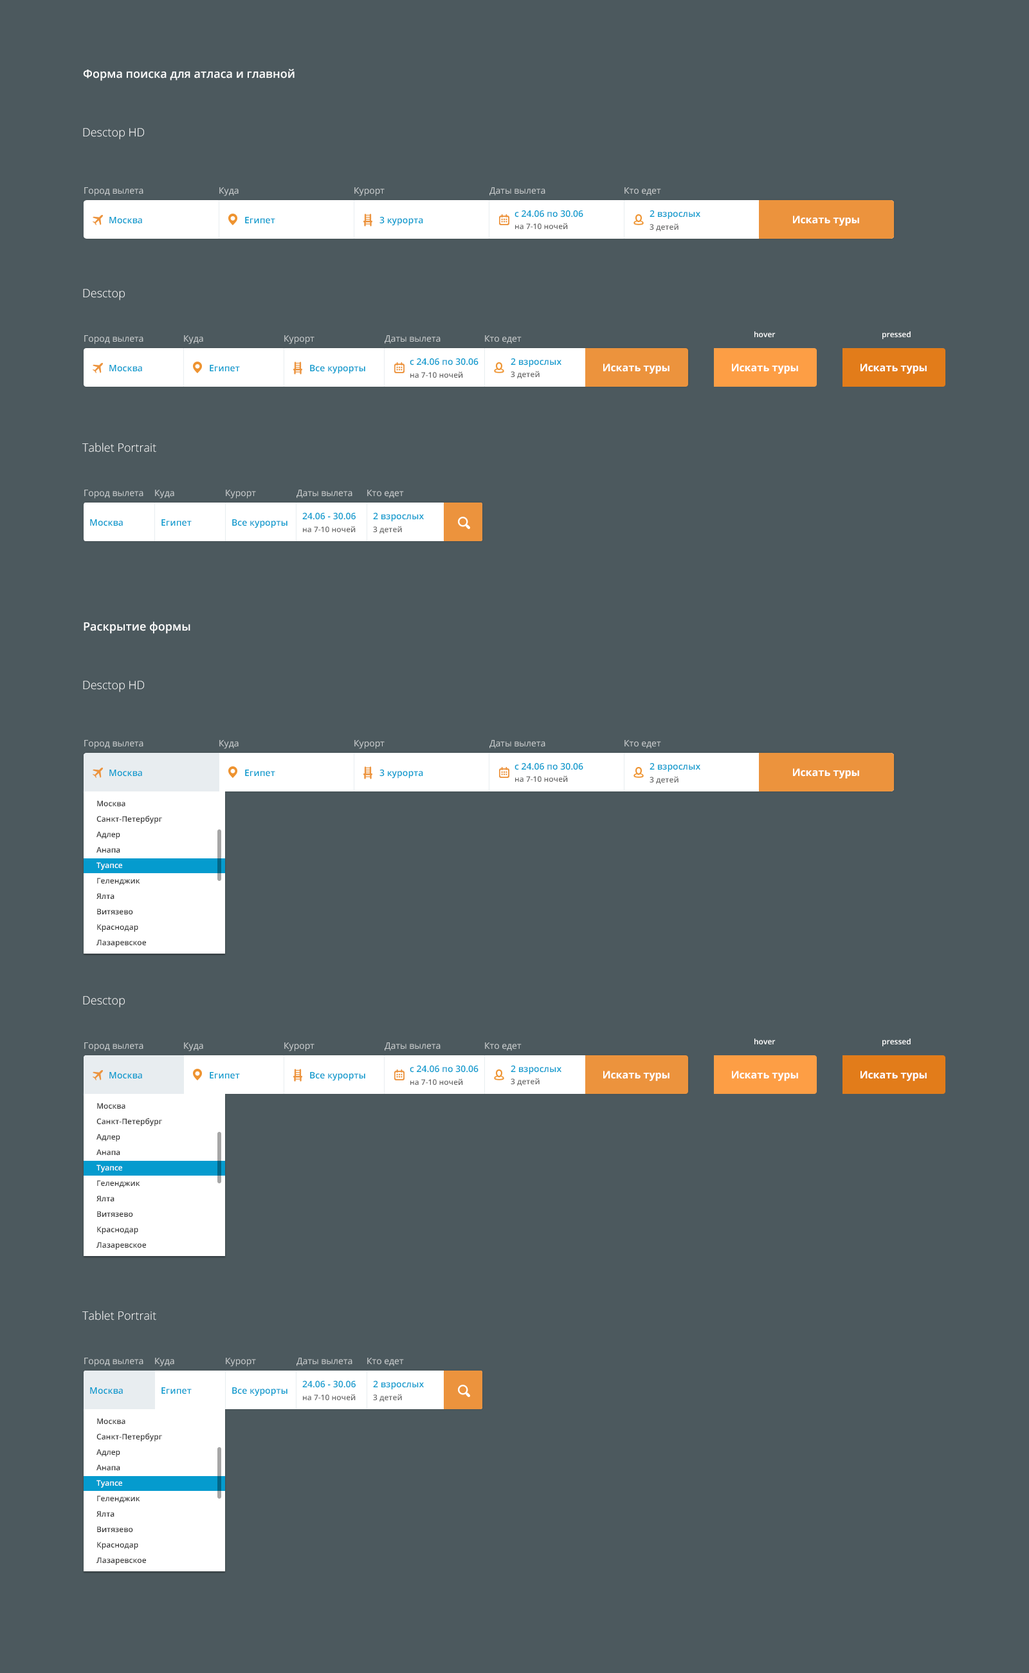
<style>
.page{position:relative;width:1029px;height:1673px;background:#4c595e}
.page>*{position:absolute;margin:0}
.t1{font:11.6px "OpenSans-Semibold";color:#ffffff}
.t2{font:11.6px "OpenSans-Light";color:#ffffff}
.t3{font:9px "OpenSans";color:#cacecf}
.t4{font:9px "OpenSans-Semibold";color:#059bce}
.t5{font:10.3px "OpenSans-Bold";color:#ffffff}
.t6{font:7.7px "OpenSans-Semibold";color:#666666}
.t7{font:7.7px "OpenSans-Semibold";color:#ffffff}
.t8{font:7.7px/15.4px "OpenSans-Semibold";color:#333333}
.t9{font:7.7px/15.4px "OpenSans-Semibold";color:#ffffff}
</style>
<div class="page">
<p class="t1" style="left:83px;top:69px;width:212px;height:12px">Форма поиска для атласа и главной</p>
<p class="t2" style="left:83px;top:128px;width:61px;height:12px">Desctop HD</p>
<p class="t3" style="left:84px;top:187px;width:59px;height:9px">Город вылета</p>
<p class="t3" style="left:219px;top:187px;width:20px;height:9px">Куда</p>
<p class="t3" style="left:354px;top:187px;width:31px;height:9px">Курорт</p>
<p class="t3" style="left:490px;top:187px;width:56px;height:9px">Даты вылета</p>
<p class="t3" style="left:625px;top:187px;width:36px;height:9px">Кто едет</p>
<p class="t4" style="left:515px;top:210px;width:68px;height:7px">c 24.06 по 30.06</p>
<p class="t4" style="left:650px;top:210px;width:51px;height:9px">2 взрослых</p>
<p class="t4" style="left:109px;top:217px;width:33px;height:7px">Москва</p>
<p class="t4" style="left:245px;top:217px;width:30px;height:7px">Египет</p>
<p class="t4" style="left:380px;top:216px;width:43px;height:10px">3 курорта</p>
<p class="t5" style="left:793px;top:216px;width:66px;height:10px">Искать туры</p>
<p class="t6" style="left:515px;top:223px;width:53px;height:6px">на 7-10 ночей</p>
<p class="t6" style="left:650px;top:223px;width:29px;height:9px">3 детей</p>
<p class="t2" style="left:83px;top:289px;width:42px;height:11px">Desctop</p>
<p class="t3" style="left:84px;top:335px;width:59px;height:9px">Город вылета</p>
<p class="t3" style="left:184px;top:335px;width:19px;height:9px">Куда</p>
<p class="t3" style="left:284px;top:335px;width:31px;height:9px">Курорт</p>
<p class="t3" style="left:385px;top:335px;width:56px;height:9px">Даты вылета</p>
<p class="t3" style="left:485px;top:335px;width:37px;height:9px">Кто едет</p>
<p class="t7" style="left:755px;top:331px;width:21px;height:6px">hover</p>
<p class="t7" style="left:883px;top:331px;width:28px;height:8px">pressed</p>
<p class="t4" style="left:109px;top:365px;width:33px;height:7px">Москва</p>
<p class="t4" style="left:210px;top:365px;width:30px;height:7px">Египет</p>
<p class="t4" style="left:310px;top:365px;width:55px;height:9px">Все курорты</p>
<p class="t4" style="left:410px;top:358px;width:69px;height:7px">c 24.06 по 30.06</p>
<p class="t4" style="left:511px;top:358px;width:51px;height:9px">2 взрослых</p>
<p class="t5" style="left:603px;top:363px;width:67px;height:11px">Искать туры</p>
<p class="t5" style="left:732px;top:363px;width:66px;height:11px">Искать туры</p>
<p class="t5" style="left:861px;top:363px;width:66px;height:11px">Искать туры</p>
<p class="t6" style="left:410px;top:371px;width:53px;height:7px">на 7-10 ночей</p>
<p class="t6" style="left:511px;top:371px;width:29px;height:8px">3 детей</p>
<p class="t2" style="left:82px;top:443px;width:74px;height:9px">Tablet Portrait</p>
<p class="t3" style="left:84px;top:490px;width:59px;height:9px">Город вылета</p>
<p class="t3" style="left:155px;top:490px;width:19px;height:9px">Куда</p>
<p class="t3" style="left:226px;top:490px;width:30px;height:9px">Курорт</p>
<p class="t3" style="left:297px;top:490px;width:56px;height:8px">Даты вылета</p>
<p class="t3" style="left:367px;top:490px;width:37px;height:8px">Кто едет</p>
<p class="t4" style="left:90px;top:519px;width:33px;height:7px">Москва</p>
<p class="t4" style="left:161px;top:519px;width:31px;height:7px">Египет</p>
<p class="t4" style="left:232px;top:519px;width:56px;height:9px">Все курорты</p>
<p class="t4" style="left:302px;top:512px;width:54px;height:8px">24.06 - 30.06</p>
<p class="t4" style="left:373px;top:512px;width:51px;height:10px">2 взрослых</p>
<p class="t6" style="left:303px;top:526px;width:53px;height:6px">на 7-10 ночей</p>
<p class="t6" style="left:373px;top:526px;width:29px;height:8px">3 детей</p>
<p class="t1" style="left:84px;top:621px;width:106px;height:13px">Раскрытие формы</p>
<p class="t2" style="left:83px;top:681px;width:61px;height:11px">Desctop HD</p>
<p class="t3" style="left:84px;top:740px;width:59px;height:9px">Город вылета</p>
<p class="t3" style="left:219px;top:740px;width:20px;height:9px">Куда</p>
<p class="t3" style="left:354px;top:740px;width:31px;height:9px">Курорт</p>
<p class="t3" style="left:490px;top:740px;width:56px;height:8px">Даты вылета</p>
<p class="t3" style="left:625px;top:740px;width:36px;height:8px">Кто едет</p>
<p class="t4" style="left:109px;top:769px;width:33px;height:7px">Москва</p>
<p class="t4" style="left:109px;top:769px;width:33px;height:7px">Москва</p>
<p class="t4" style="left:245px;top:769px;width:30px;height:7px">Египет</p>
<p class="t4" style="left:380px;top:769px;width:43px;height:9px">3 курорта</p>
<p class="t4" style="left:515px;top:762px;width:68px;height:8px">c 24.06 по 30.06</p>
<p class="t4" style="left:650px;top:762px;width:51px;height:10px">2 взрослых</p>
<p class="t5" style="left:793px;top:768px;width:66px;height:10px">Искать туры</p>
<p class="t6" style="left:515px;top:775px;width:53px;height:7px">на 7-10 ночей</p>
<p class="t6" style="left:650px;top:776px;width:29px;height:8px">3 детей</p>
<p class="t8" style="left:96px;top:800px;width:66px;height:147px">Москва<br>Санкт-Петербург<br>Адлер<br>Анапа<br><span class="t9">Туапсе<br></span>Геленджик<br>Ялта<br>Витязево<br>Краснодар<br>Лазаревское</p>
<p class="t2" style="left:83px;top:996px;width:42px;height:11px">Desctop</p>
<p class="t3" style="left:84px;top:1042px;width:59px;height:9px">Город вылета</p>
<p class="t3" style="left:184px;top:1042px;width:19px;height:9px">Куда</p>
<p class="t3" style="left:284px;top:1042px;width:31px;height:9px">Курорт</p>
<p class="t3" style="left:385px;top:1042px;width:56px;height:9px">Даты вылета</p>
<p class="t3" style="left:485px;top:1042px;width:37px;height:9px">Кто едет</p>
<p class="t7" style="left:755px;top:1038px;width:21px;height:6px">hover</p>
<p class="t7" style="left:883px;top:1038px;width:28px;height:8px">pressed</p>
<p class="t4" style="left:109px;top:1072px;width:33px;height:7px">Москва</p>
<p class="t4" style="left:109px;top:1072px;width:33px;height:7px">Москва</p>
<p class="t4" style="left:210px;top:1072px;width:30px;height:7px">Египет</p>
<p class="t4" style="left:310px;top:1072px;width:55px;height:9px">Все курорты</p>
<p class="t4" style="left:410px;top:1065px;width:69px;height:7px">c 24.06 по 30.06</p>
<p class="t4" style="left:511px;top:1065px;width:51px;height:9px">2 взрослых</p>
<p class="t5" style="left:603px;top:1070px;width:67px;height:11px">Искать туры</p>
<p class="t5" style="left:732px;top:1070px;width:66px;height:11px">Искать туры</p>
<p class="t5" style="left:861px;top:1070px;width:66px;height:11px">Искать туры</p>
<p class="t6" style="left:410px;top:1078px;width:53px;height:7px">на 7-10 ночей</p>
<p class="t6" style="left:511px;top:1078px;width:29px;height:8px">3 детей</p>
<p class="t8" style="left:96px;top:1103px;width:66px;height:146px">Москва<br>Санкт-Петербург<br>Адлер<br>Анапа<br><span class="t9">Туапсе<br></span>Геленджик<br>Ялта<br>Витязево<br>Краснодар<br>Лазаревское</p>
<p class="t2" style="left:82px;top:1310px;width:74px;height:10px">Tablet Portrait</p>
<p class="t3" style="left:84px;top:1357px;width:59px;height:9px">Город вылета</p>
<p class="t3" style="left:155px;top:1357px;width:19px;height:9px">Куда</p>
<p class="t3" style="left:226px;top:1357px;width:30px;height:9px">Курорт</p>
<p class="t3" style="left:297px;top:1357px;width:56px;height:9px">Даты вылета</p>
<p class="t3" style="left:367px;top:1357px;width:37px;height:9px">Кто едет</p>
<p class="t4" style="left:302px;top:1380px;width:54px;height:8px">24.06 - 30.06</p>
<p class="t4" style="left:373px;top:1380px;width:51px;height:10px">2 взрослых</p>
<p class="t4" style="left:90px;top:1387px;width:33px;height:7px">Москва</p>
<p class="t4" style="left:90px;top:1387px;width:33px;height:7px">Москва</p>
<p class="t4" style="left:161px;top:1387px;width:31px;height:7px">Египет</p>
<p class="t4" style="left:232px;top:1387px;width:56px;height:9px">Все курорты</p>
<p class="t6" style="left:303px;top:1393px;width:53px;height:7px">на 7-10 ночей</p>
<p class="t6" style="left:373px;top:1393px;width:29px;height:9px">3 детей</p>
<p class="t8" style="left:96px;top:1418px;width:66px;height:147px">Москва<br>Санкт-Петербург<br>Адлер<br>Анапа<br><span class="t9">Туапсе<br></span>Геленджик<br>Ялта<br>Витязево<br>Краснодар<br>Лазаревское</p>
</div>
